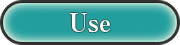
<style>
.page{position:relative;width:180px;height:45px}
.page>*{position:absolute;margin:0}
.t1{font:25px "RyuminPro-ExBold";color:#fff6f3}
</style>
<div class="page">
<p class="t1" style="left:69px;top:13px;width:41px;height:20px">Use</p>
</div>
